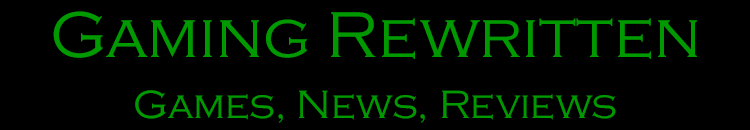
<style>
.page{position:relative;width:750px;height:130px;background:#000000}
.page>*{position:absolute;margin:0}
.t1{font:67px "CopperplateGothic-Light";color:#009900}
.t2{font:41px "CopperplateGothic-Light";color:#009900}
</style>
<div class="page">
<p class="t1" style="left:53px;top:11px;width:644px;height:48px">Gaming Rewritten</p>
<p class="t2" style="left:135px;top:90px;width:481px;height:33px">Games, News, Reviews</p>
</div>
